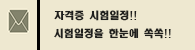
<style>
.page{position:relative;width:195px;height:50px;background:#eee8d0}
.page>*{position:absolute;margin:0}
.t1{font:10px "HeadlineR-HM";color:#1f1f1d}
</style>
<div class="page">
<p class="t1" style="left:54px;top:10px;width:83px;height:11px">자격증 시험일정!!</p>
<p class="t1" style="left:54px;top:28px;width:117px;height:11px">시험일정을 한눈에 쏙쏙!!</p>
</div>
